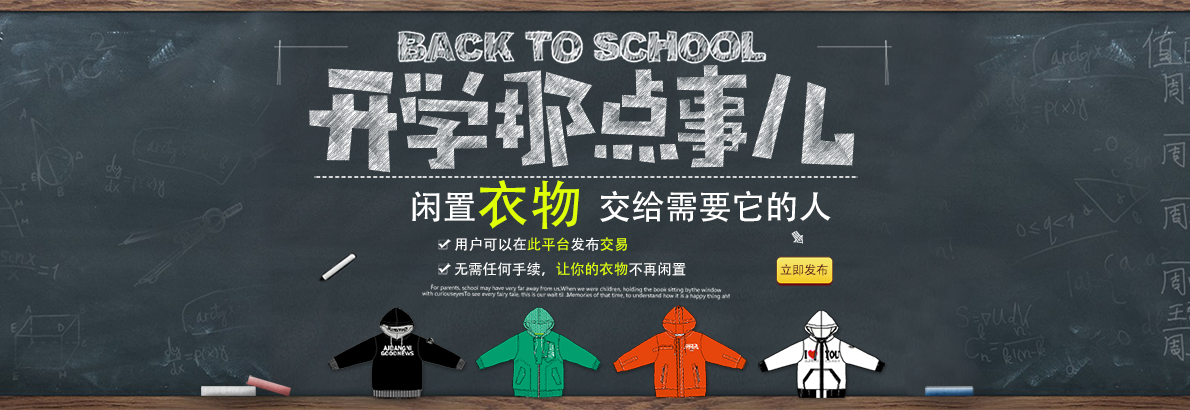
<style>
.page{position:relative;width:1190px;height:410px}
.page>*{position:absolute;margin:0}
.t1{font:5.1px "MicrosoftYaHei-Bold";scale:2.84 1}
.t2{font:33.4px "AdobeHeitiStd-Regular";color:#ffffff}
.t3{font:53.2px "AdobeHeitiStd-Regular";color:#dfff04}
.t4{font:14.5px "AdobeHeitiStd-Regular";color:#ffffff}
.t5{font:14.5px "AdobeHeitiStd-Regular";color:#dfff04}
.t6{font:12.3px "AdobeHeitiStd-Regular";letter-spacing:-0.02em;color:#60161c}
.t7{font:5.5px/6.1px "MicrosoftYaHei";letter-spacing:-0.02em}
</style>
<div class="page">
<p class="t1" style="left:314px;top:176px;width:544px;height:2px">--------------------------------------------------------------------------------------</p>
<p class="t2" style="left:412px;top:180px;width:419px;height:49px">闲置<span class="t3">衣物</span>  交给需要它的人</p>
<p class="t4" style="left:455px;top:237px;width:173px;height:15px">用户可以在<span class="t5">此平台</span>发布<span class="t5">交易</span></p>
<p class="t4" style="left:454px;top:262px;width:232px;height:14px">无需任何手续，<span class="t5">让你的衣物</span>不再闲置</p>
<p class="t6" style="left:780px;top:264px;width:48px;height:12px">立即发布</p>
<p class="t7" style="left:422px;top:284px;width:308px;height:16px;text-align:center;rotate:1deg">For parents, school may have very far away from us,When we were children, holding the book sitting by the window<br>with curiouseyesTo see every fairy tale, this is our wait til ...Memories of that time, to understand how it is a happy thing ah!</p>
</div>
